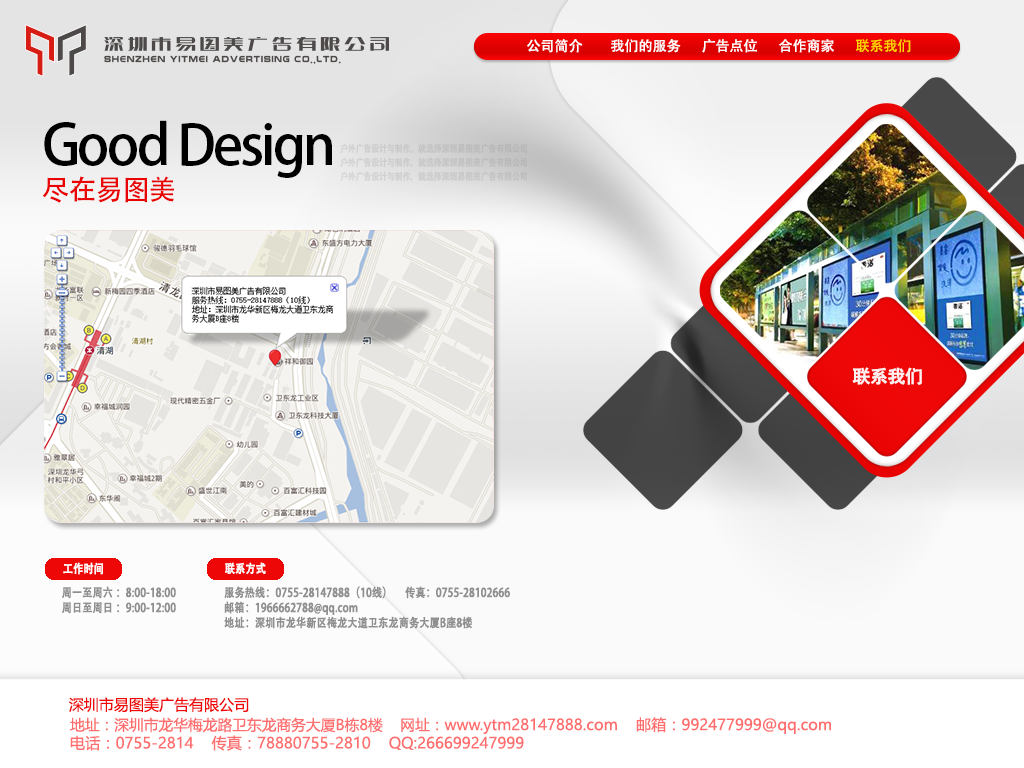
<style>
.page{position:relative;width:1024px;height:768px}
.page>*{position:absolute;margin:0}
.t1{font:14px "AdobeHeitiStd-Regular";color:#ffffff}
.t2{font:14px "AdobeHeitiStd-Regular";color:#ffd200}
.t3{font:55px/30px "AdobeHeitiStd-Regular";letter-spacing:-0.05em;color:#000000}
.t4{font:28px/30px "AdobeHeitiStd-Regular";letter-spacing:-0.05em;color:#e90303}
.t5{font:9.6px/14px "AdobeHeitiStd-Regular";letter-spacing:-0.05em;color:#c8c8c8;font-weight:bold;scale:0.83 1}
.t6{font:18px "AdobeHeitiStd-Regular";letter-spacing:-0.05em;color:#ffffff;font-weight:bold}
.t7{font:12px "AdobeHeitiStd-Regular";color:#ffffff;font-weight:bold;scale:0.83 1}
.t8{font:12px/15.1px "AdobeHeitiStd-Regular";color:#8f8f8f;font-weight:bold;scale:0.83 1}
.t9{font:15px "MicrosoftYaHei";color:#ef0808}
.t10{font:15.3px "MicrosoftYaHei";color:#ff5757}
.t11{font:14.8px "MicrosoftYaHei";color:#ff5757}
</style>
<div class="page">
<p class="t1" style="left:527px;top:39px;width:384px;height:14px">公司简介        我们的服务      广告点位      合作商家      <span class="t2">联系我们</span></p>
<p class="t3" style="left:42px;top:120px;width:290px;height:83px">Good Design<br><span class="t4">尽在易图美</span></p>
<p class="t5" style="left:340px;top:143px;width:187px;height:39px">户外广告设计与制作，就选择深圳易图美广告有限公司<br>户外广告设计与制作，就选择深圳易图美广告有限公司<br>户外广告设计与制作，就选择深圳易图美广告有限公司</p>
<p class="t6" style="left:852px;top:367px;width:70px;height:18px;opacity:0.91">联系我们</p>
<p class="t7" style="left:63px;top:562px;width:40px;height:13px">工作时间</p>
<p class="t7" style="left:225px;top:562px;width:41px;height:12px">联系方式</p>
<p class="t8" style="left:62px;top:586px;width:114px;height:28px;text-align:right">周一至周六 ：8:00-18:00<br>周日至周日 ：9:00-12:00</p>
<p class="t8" style="left:224px;top:586px;width:286px;height:43px">服务热线：0755-28147888（10线）     传真：0755-28102666<br>邮箱：1966662788@qq.com<br>地址：深圳市龙华新区梅龙大道卫东龙商务大厦B座8楼</p>
<p class="t9" style="left:68px;top:697px;width:181px;height:16px">深圳市易图美广告有限公司</p>
<p class="t10" style="left:70px;top:717px;width:761px;height:34px;opacity:0.9"><span class="t11">地址：深圳市龙华梅龙路卫东龙商务大厦B栋8楼    网址：</span>www.ytm28147888.com    邮箱：992477999@qq.com<br>电话：0755-2814    传真：78880755-2810    QQ:266699247999</p>
</div>
